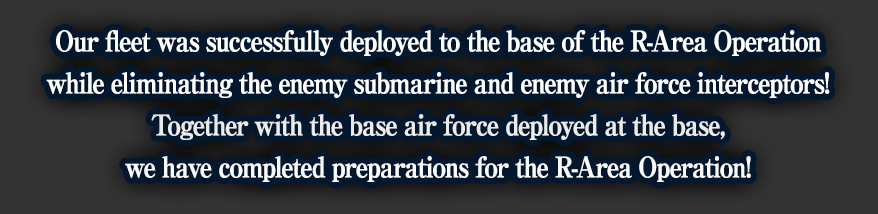
<style>
.page{position:relative;width:878px;height:214px;background:#03172f}
.page>*{position:absolute;margin:0}
.t1{font:28px/42px "RyuminPro-ExBold";letter-spacing:-0.08em;color:#ffffff;font-weight:bold;scale:0.9 1}
</style>
<div class="page">
<p class="t1" style="left:46px;top:30px;width:784px;height:152px;text-align:center">Our fleet was successfully deployed to the base of the R-Area Operation<br>while eliminating the enemy submarine and enemy air force interceptors!<br>Together with the base air force deployed at the base,<br>we have completed preparations for the R-Area Operation!</p>
</div>
